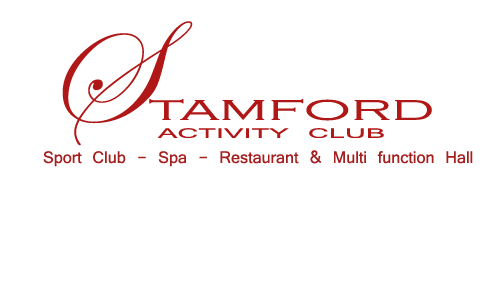
<style>
.page{position:relative;width:500px;height:300px;background:#ffffff}
.page>*{position:absolute;margin:0}
.t1{font:150px "EdwardianScriptITC";color:#b01818}
.t2{font:36px "CopperplateGothic-Light";color:#b01818;scale:1.75 1}
.t3{font:14.7px "Vrinda";color:#b01818;scale:2.2 1}
.t4{font:18px "Vrinda";color:#a61f1f}
</style>
<div class="page">
<p class="t1" style="left:62px;top:21px;width:131px;height:125px">S</p>
<p class="t2" style="left:149px;top:99px;width:283px;height:22px">tamford</p>
<p class="t3" style="left:157px;top:128px;width:227px;height:10px">ACTIVITY CLUB</p>
<p class="t4" style="left:43px;top:150px;width:430px;height:17px">Sport Club - Spa - Restaurant &amp; Multi function Hall</p>
</div>
